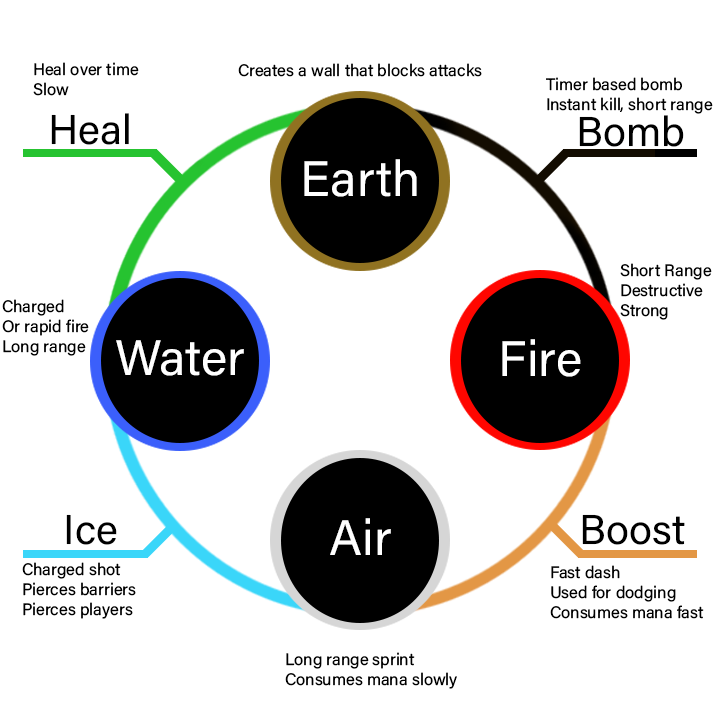
<style>
.page{position:relative;width:720px;height:720px;background:#ffffff}
.page>*{position:absolute;margin:0}
.t1{font:16.7px "AcuminConcept-Regular";color:#000000}
.t2{font:41.7px "AcuminConcept-Regular";color:#000000}
.t3{font:50px "AcuminConcept-Regular";color:#ffffff}
</style>
<div class="page">
<p class="t1" style="left:33px;top:62px;width:106px;height:34px">Heal over time<br>Slow</p>
<p class="t1" style="left:238px;top:63px;width:244px;height:14px">Creates a wall that blocks attacks</p>
<p class="t1" style="left:546px;top:77px;width:167px;height:37px">Timer based bomb<br>Instant kill, short range</p>
<p class="t2" style="left:51px;top:113px;width:78px;height:32px">Heal</p>
<p class="t2" style="left:579px;top:115px;width:105px;height:32px">Bomb</p>
<p class="t3" style="left:304px;top:159px;width:113px;height:38px">Earth</p>
<p class="t1" style="left:620px;top:263px;width:92px;height:57px">Short Range<br>Destructive<br>Strong</p>
<p class="t1" style="left:2px;top:299px;width:87px;height:57px">Charged<br>Or rapid fire<br>Long range</p>
<p class="t3" style="left:116px;top:340px;width:128px;height:36px">Water</p>
<p class="t3" style="left:502px;top:339px;width:79px;height:38px">Fire</p>
<p class="t2" style="left:66px;top:514px;width:51px;height:31px">Ice</p>
<p class="t3" style="left:330px;top:518px;width:61px;height:37px">Air</p>
<p class="t2" style="left:582px;top:514px;width:103px;height:31px">Boost</p>
<p class="t1" style="left:22px;top:562px;width:114px;height:57px">Charged shot<br>Pierces barriers<br>Pierces players</p>
<p class="t1" style="left:550px;top:565px;width:154px;height:54px">Fast dash<br>Used for dodging<br>Consumes mana fast</p>
<p class="t1" style="left:285px;top:652px;width:172px;height:37px">Long range sprint<br>Consumes mana slowly</p>
</div>
